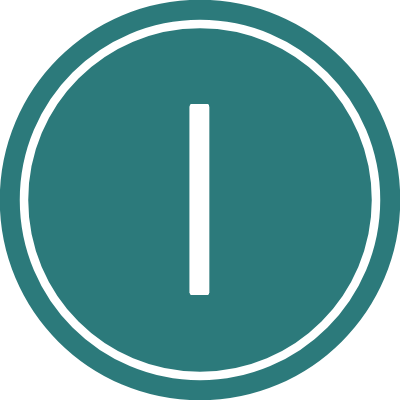
<style>
.page{position:relative;width:400px;height:400px;background:#2c7a7b}
.page>*{position:absolute;margin:0}
.t1{font:272.7px "Barlow-Regular";color:#ffffff}
</style>
<div class="page">
<p class="t1" style="left:189px;top:104px;width:21px;height:191px">I</p>
<p class="t1" style="left:189px;top:104px;width:21px;height:191px">I</p>
</div>
